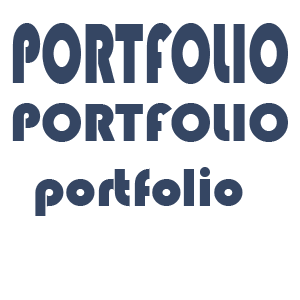
<style>
.page{position:relative;width:300px;height:300px;background:#ffffff}
.page>*{position:absolute;margin:0}
.t1{font:87.8px "Bauhaus93";color:#354663;scale:0.63 1}
.t2{font:55px "Bauhaus93";color:#354663}
</style>
<div class="page">
<p class="t1" style="left:12px;top:23px;width:276px;height:61px">PORTFOLIO</p>
<p class="t2" style="left:12px;top:103px;width:276px;height:39px">PORTFOLIO</p>
<p class="t2" style="left:35px;top:167px;width:208px;height:49px">portfolio</p>
</div>
